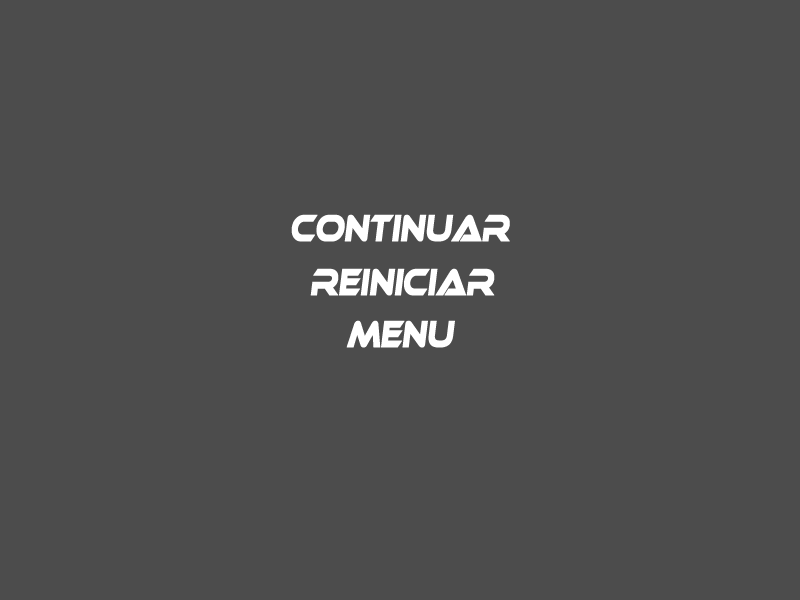
<style>
.page{position:relative;width:800px;height:600px;background:#4c4c4c}
.page>*{position:absolute;margin:0}
.t1{font:36px "Ethnocentric";letter-spacing:-0.005em;color:#ffffff;font-weight:bold;font-style:italic;scale:0.69 1}
</style>
<div class="page">
<p class="t1" style="left:291px;top:214px;width:219px;height:28px">continuar</p>
<p class="t1" style="left:310px;top:268px;width:185px;height:28px">reiniciar</p>
<p class="t1" style="left:346px;top:320px;width:109px;height:28px">menu</p>
</div>
